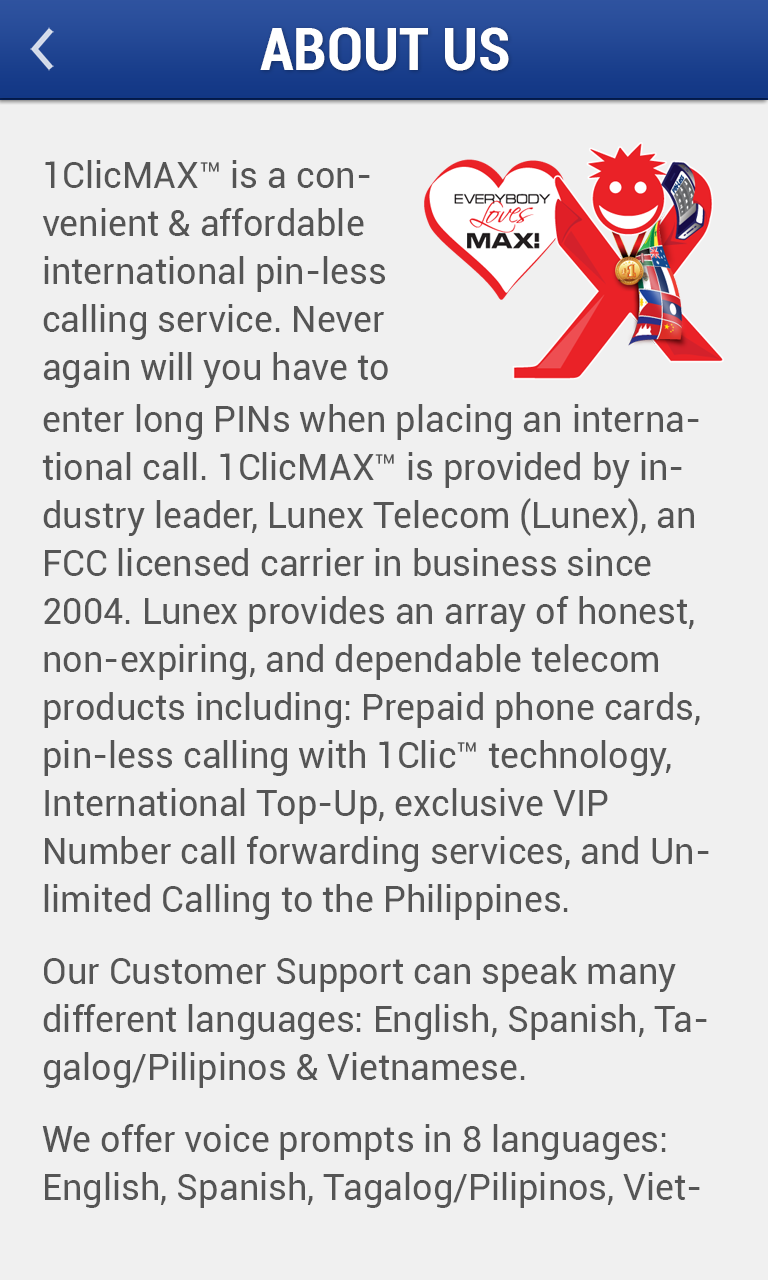
<style>
.page{position:relative;width:768px;height:1280px;background:#f0f0f0}
.page>*{position:absolute;margin:0}
.t1{font:60px "Roboto-BoldCondensed";color:#ffffff}
.t2{font:36px/48px "Roboto-Regular";color:#555555}
</style>
<div class="page">
<p class="t1" style="left:260px;top:27px;width:249px;height:44px">ABOUT US</p>
<p class="t2" style="left:42px;top:160px;width:346px;height:228px">1ClicMAX™ is a convenient &amp; affordable international pin-less calling service. Never again will you have to</p>
<p class="t2" style="left:42px;top:404px;width:667px;height:804px">enter long PINs when placing an international call. 1ClicMAX™ is provided by industry leader, Lunex Telecom (Lunex), an FCC licensed carrier in business since 2004. Lunex provides an array of honest, non-expiring, and dependable telecom products including: Prepaid phone cards, pin-less calling with 1Clic™ technology, International Top-Up, exclusive VIP Number call forwarding services, and Unlimited Calling to the Philippines.<br>Our Customer Support can speak many different languages: English, Spanish, Tagalog/Pilipinos &amp; Vietnamese.<br>We offer voice prompts in 8 languages: English, Spanish, Tagalog/Pilipinos, Vietnamese, Chinese, Korean, Laotian, and Thai.</p>
</div>
